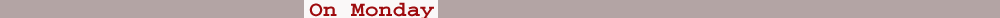
<style>
.page{position:relative;width:1000px;height:18px;background:#b3a4a4}
.page>*{position:absolute;margin:0}
.t1{font:21.3px "Courier-Bold";color:#9e0b0e;scale:1.09 1}
</style>
<div class="page">
<p class="t1" style="left:309px;top:2px;width:125px;height:18px">On Monday</p>
</div>
